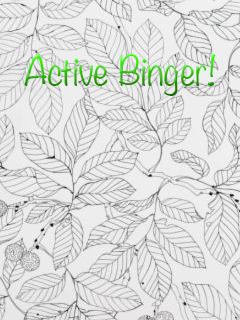
<style>
.page{position:relative;width:240px;height:320px}
.page>*{position:absolute;margin:0}
.t1{font:36px "Noteworthy-Light"}
</style>
<div class="page">
<p class="t1" style="left:24px;top:54px;width:192px;height:42px">Active Binger!</p>
</div>
